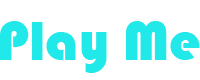
<style>
.page{position:relative;width:200px;height:80px;background:#ffffff}
.page>*{position:absolute;margin:0}
.t1{font:56.7px "Bauhaus93";color:#21e9e9}
</style>
<div class="page">
<p class="t1" style="left:0px;top:21px;width:200px;height:52px">Play Me</p>
</div>
